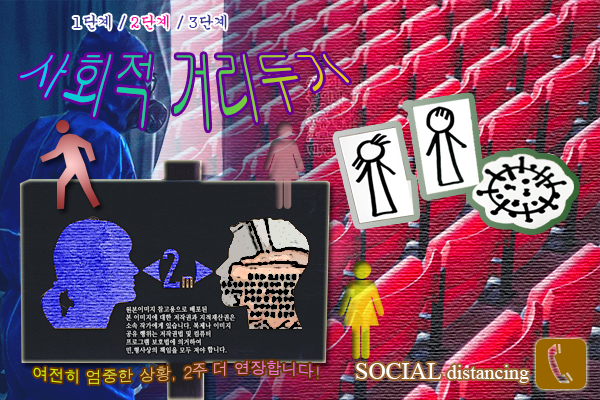
<style>
.page{position:relative;width:600px;height:400px}
.page>*{position:absolute;margin:0}
.t1{font:16px "Gungsuh";color:#333399}
.t2{font:16px "Gungsuh";color:#ff0099}
.t3{font:39.9px/4px "Gulim"}
.t4{font:15.9px "Dotum"}
.t5{font:19.8px "TimesNewRomanPSMT";color:#ffffff}
.t6{font:23.7px "TimesNewRomanPSMT";color:#ffffff}
</style>
<div class="page">
<p class="t1" style="left:73px;top:14px;width:154px;height:16px">1단계 / <span class="t2">2단계</span> / 3단계</p>
<p class="t3" style="left:20px;top:54px;width:329px;height:77px">사회적 거리두기</p>
<p class="t4" style="left:33px;top:360px;width:286px;height:25px">여전히 엄중한 상황, 2주 더 연장합니다!</p>
<p class="t5" style="left:356px;top:363px;width:173px;height:20px"><span class="t6">SOCIAL </span>distancing</p>
</div>
